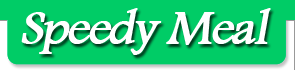
<style>
.page{position:relative;width:295px;height:70px;background:#00cc66}
.page>*{position:absolute;margin:0}
.t1{font:50px "FootlightMTLight";letter-spacing:-0.05em;color:#ffffff;font-weight:bold;font-style:italic}
</style>
<div class="page">
<p class="t1" style="left:21px;top:8px;width:250px;height:47px">Speedy Meal</p>
</div>
